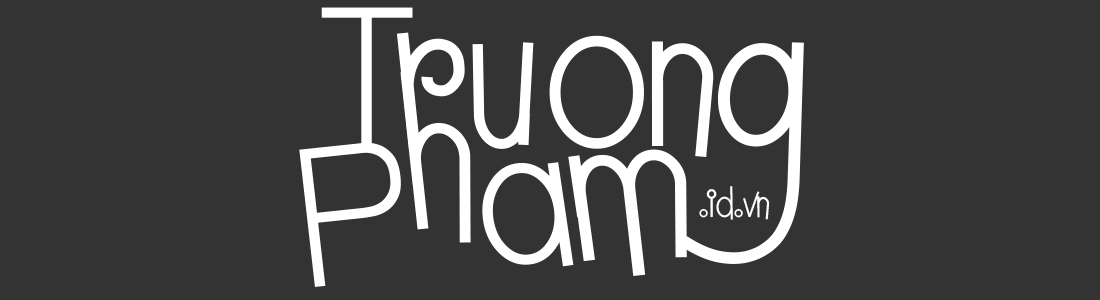
<style>
.page{position:relative;width:1100px;height:300px;background:#333333}
.page>*{position:absolute;margin:0}
.t1{font:175.1px "UTM-Tam-Le";color:#ffffff;scale:1.03 1}
.t2{font:175.2px "UTM-Tam-Le";color:#ffffff;scale:1.04 1}
.t3{font:34.5px "UTM-Tam-Le";color:#ffffff}
</style>
<div class="page">
<p class="t1" style="left:321px;top:7px;width:483px;height:257px">Truong</p>
<p class="t2" style="left:400px;top:71px;width:71px;height:172px;rotate:-6deg">h</p>
<p class="t2" style="left:299px;top:142px;width:388px;height:145px;rotate:-6deg">P am</p>
<p class="t3" style="left:699px;top:186px;width:71px;height:34px">.id.vn</p>
</div>
